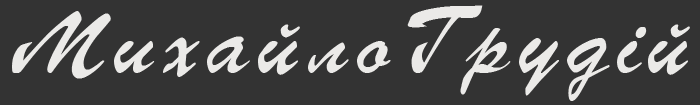
<style>
.page{position:relative;width:700px;height:105px;background:#333333}
.page>*{position:absolute;margin:0}
.t1{font:93px "UkrainianBrushScript";letter-spacing:0.1em;color:#ebeae8}
</style>
<div class="page">
<p class="t1" style="left:12px;top:5px;width:678px;height:96px">МихайлоГрудій</p>
</div>
